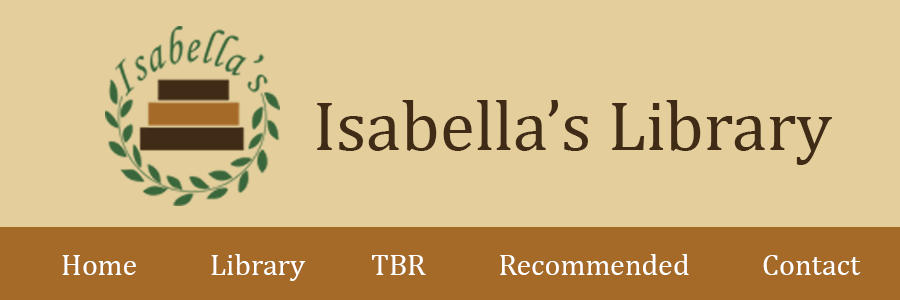
<style>
.page{position:relative;width:900px;height:300px;background:#e3ce9c}
.page>*{position:absolute;margin:0}
.t1{font:71px "Cambria";color:#402b16}
.t2{font:30px "Cambria";color:#ffffff}
</style>
<div class="page">
<p class="t1" style="left:317px;top:100px;width:515px;height:65px">Isabella’s Library</p>
<p class="t2" style="left:62px;top:254px;width:799px;height:27px">Home           Library          TBR           Recommended           Contact</p>
</div>
